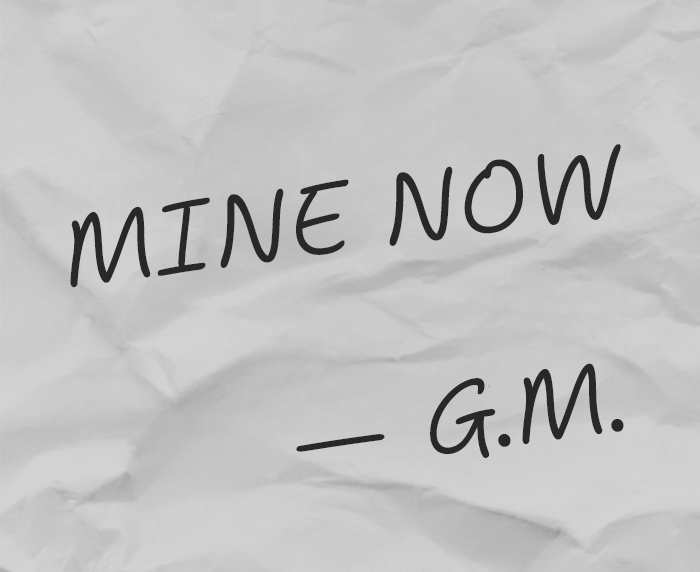
<style>
.page{position:relative;width:700px;height:572px}
.page>*{position:absolute;margin:0}
.t1{font:100px "ShantellSans-LightItalic";color:#282829}
.t2{font:100px "ShantellSans-Regular";color:#000000}
</style>
<div class="page">
<p class="t1" style="left:70px;top:144px;width:551px;height:144px;rotate:-7deg"><span class="t2"><br><br><br></span>MINE NOW</p>
<p class="t1" style="left:296px;top:363px;width:328px;height:95px;rotate:-8deg">— G.M.</p>
</div>
